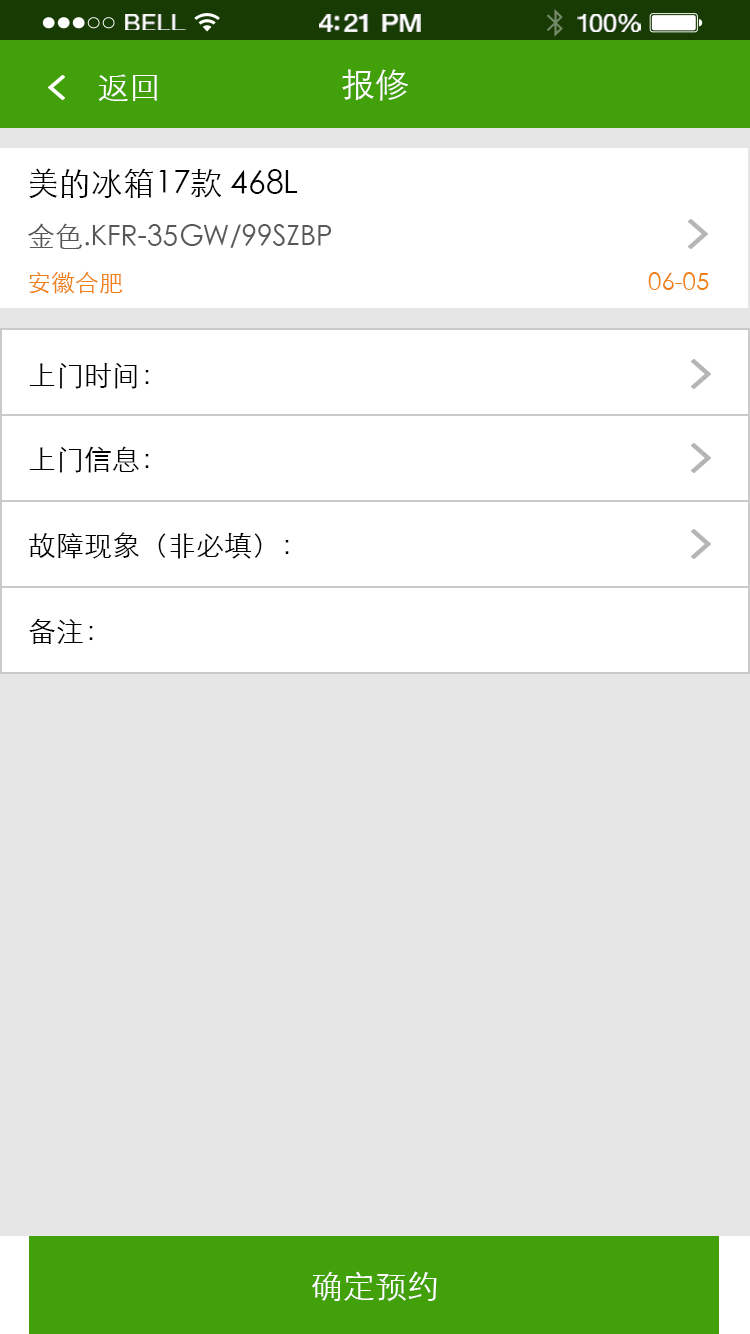
<style>
.page{position:relative;width:750px;height:1334px;background:#e6e6e6}
.page>*{position:absolute;margin:0}
.t1{font:23.3px "HelveticaNeue";letter-spacing:0.02em;color:#ffffff;scale:1.06 1}
.t2{font:25.3px "HelveticaNeue-Medium";letter-spacing:-0.02em;color:#ffffff;scale:1.06 1}
.t3{font:24.3px "HelveticaNeue";letter-spacing:-0.02em;color:#ffffff;scale:1.06 1}
.t4{font:32px "STXihei";color:#ffffff}
.t5{font:34px "STXihei";color:#ffffff}
.t6{font:28px/56px "STXihei";color:#595757}
.t7{font:32px/56px "STXihei";color:#000000}
.t8{font:24px "STXihei";color:#ef8013}
.t9{font:28px "STXihei";color:#000000}
</style>
<div class="page">
<p class="t1" style="left:125px;top:14px;width:61px;height:16px">BELL</p>
<p class="t2" style="left:319px;top:14px;width:102px;height:18px">4:21 PM</p>
<p class="t3" style="left:577px;top:14px;width:64px;height:18px">100%</p>
<p class="t4" style="left:98px;top:74px;width:59px;height:27px">返回</p>
<p class="t5" style="left:342px;top:69px;width:66px;height:32px">报修</p>
<p class="t6" style="left:28px;top:168px;width:304px;height:81px"><span class="t7">美的冰箱17款 468L <br></span>金色.KFR-35GW/99SZBP</p>
<p class="t8" style="left:29px;top:271px;width:94px;height:23px">安徽合肥</p>
<p class="t8" style="left:648px;top:272px;width:61px;height:18px">06-05</p>
<p class="t9" style="left:29px;top:362px;width:120px;height:27px">上门时间：</p>
<p class="t9" style="left:29px;top:446px;width:120px;height:27px">上门信息：</p>
<p class="t9" style="left:29px;top:532px;width:260px;height:27px">故障现象（非必填）：</p>
<p class="t9" style="left:29px;top:618px;width:64px;height:26px">备注：</p>
<p class="t4" style="left:311px;top:1271px;width:126px;height:30px">确定预约</p>
</div>
